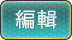
<style>
.page{position:relative;width:72px;height:40px}
.page>*{position:absolute;margin:0}
.t1{font:20px "GothicMB101Pr6N-Light";letter-spacing:0.1em;color:#fff6f2}
</style>
<div class="page">
<p class="t1" style="left:15px;top:10px;width:42px;height:19px">編輯</p>
</div>
